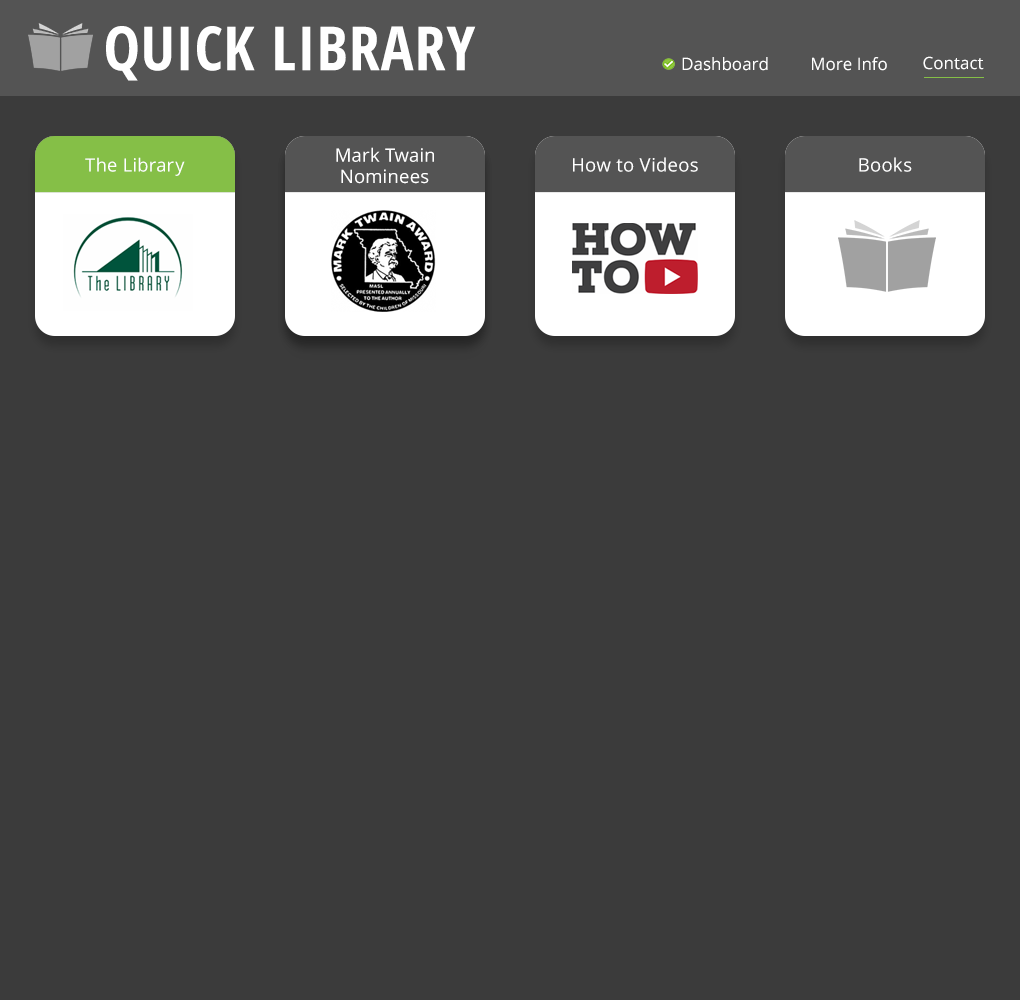
<style>
.page{position:relative;width:1020px;height:1000px;background:#3b3b3b}
.page>*{position:absolute;margin:0}
.t1{font:61.1px "OpenSans-CondensedBold";letter-spacing:0.02em;color:#ffffff;text-transform:uppercase}
.t2{font:61.1px "OpenSans-CondensedBold";letter-spacing:0.01em;color:#ffffff;text-transform:uppercase}
.t3{font:17px "OpenSans";color:#ffffff}
.t4{font:18.4px "OpenSans";letter-spacing:0.02em;color:#ffffff}
.t5{font:18.2px "OpenSans";letter-spacing:0.02em;color:#ffffff}
</style>
<div class="page">
<p class="t1" style="left:106px;top:26px;width:370px;height:55px"><span class="t2">Quick</span> Library</p>
<p class="t3" style="left:682px;top:57px;width:86px;height:14px">Dashboard</p>
<p class="t3" style="left:812px;top:57px;width:75px;height:14px">More Info</p>
<p class="t3" style="left:923px;top:56px;width:61px;height:14px">Contact</p>
<p class="t4" style="left:336px;top:147px;width:98px;height:15px">Mark Twain</p>
<p class="t5" style="left:85px;top:157px;width:100px;height:19px">The Library</p>
<p class="t4" style="left:573px;top:157px;width:125px;height:15px">How to Videos</p>
<p class="t4" style="left:859px;top:157px;width:53px;height:15px">Books</p>
<p class="t4" style="left:341px;top:169px;width:88px;height:15px">Nominees</p>
</div>
